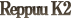
<style>
.page{position:relative;width:72px;height:18px;background:#ffffff}
.page>*{position:absolute;margin:0}
.t1{font:18px "RyuminPro-ExBold";letter-spacing:-0.12em;color:#4a3f32;font-weight:bold;scale:0.9 1}
</style>
<div class="page">
<p class="t1" style="left:0px;top:1px;width:72px;height:18px">Reppuu K2</p>
</div>
